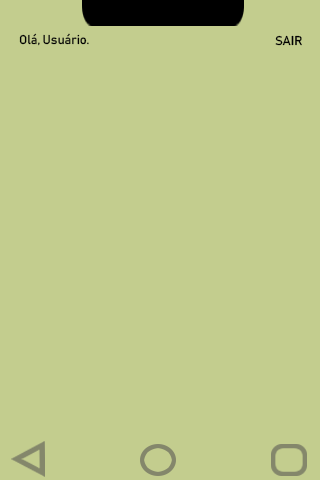
<style>
.page{position:relative;width:320px;height:480px;background:#c3cd8e}
.page>*{position:absolute;margin:0}
.t1{font:12.5px "Bahnschrift";color:#000000}
</style>
<div class="page">
<p class="t1" style="left:19px;top:33px;width:70px;height:13px">Olá, Usuário.</p>
<p class="t1" style="left:275px;top:35px;width:27px;height:11px">SAIR</p>
</div>
